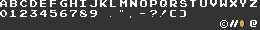
<style>
.page{position:relative;width:260px;height:30px;background:#333333}
.page>*{position:absolute;margin:0}
.t1{font:10px "PixelEmulator";letter-spacing:-0.28em;color:#ffffff}
</style>
<div class="page">
<p class="t1" style="left:0px;top:0px;width:7px;height:7px">A</p>
<p class="t1" style="left:10px;top:0px;width:7px;height:7px">b</p>
<p class="t1" style="left:20px;top:0px;width:7px;height:7px">c</p>
<p class="t1" style="left:30px;top:0px;width:7px;height:7px">d</p>
<p class="t1" style="left:40px;top:0px;width:6px;height:7px">e</p>
<p class="t1" style="left:50px;top:0px;width:6px;height:7px">f</p>
<p class="t1" style="left:60px;top:0px;width:7px;height:7px">g</p>
<p class="t1" style="left:70px;top:0px;width:7px;height:7px">h</p>
<p class="t1" style="left:80px;top:0px;width:6px;height:7px">i</p>
<p class="t1" style="left:90px;top:0px;width:7px;height:7px">j</p>
<p class="t1" style="left:100px;top:0px;width:7px;height:7px">k</p>
<p class="t1" style="left:110px;top:0px;width:6px;height:7px">l</p>
<p class="t1" style="left:120px;top:0px;width:7px;height:7px">m</p>
<p class="t1" style="left:130px;top:0px;width:7px;height:7px">n</p>
<p class="t1" style="left:140px;top:0px;width:7px;height:7px">o</p>
<p class="t1" style="left:150px;top:0px;width:7px;height:7px">p</p>
<p class="t1" style="left:160px;top:0px;width:7px;height:7px">q</p>
<p class="t1" style="left:170px;top:0px;width:7px;height:7px">r</p>
<p class="t1" style="left:180px;top:0px;width:7px;height:7px">s</p>
<p class="t1" style="left:190px;top:0px;width:6px;height:7px">t</p>
<p class="t1" style="left:200px;top:0px;width:7px;height:7px">u</p>
<p class="t1" style="left:210px;top:0px;width:7px;height:7px">v</p>
<p class="t1" style="left:220px;top:0px;width:7px;height:7px">w</p>
<p class="t1" style="left:230px;top:0px;width:7px;height:7px">x</p>
<p class="t1" style="left:240px;top:0px;width:6px;height:7px">y</p>
<p class="t1" style="left:250px;top:0px;width:7px;height:7px">z</p>
<p class="t1" style="left:0px;top:10px;width:7px;height:7px">0</p>
<p class="t1" style="left:10px;top:10px;width:6px;height:7px">1</p>
<p class="t1" style="left:20px;top:10px;width:7px;height:7px">2</p>
<p class="t1" style="left:30px;top:10px;width:7px;height:7px">3</p>
<p class="t1" style="left:40px;top:10px;width:7px;height:7px">4</p>
<p class="t1" style="left:50px;top:10px;width:7px;height:7px">5</p>
<p class="t1" style="left:60px;top:10px;width:7px;height:7px">6</p>
<p class="t1" style="left:70px;top:10px;width:7px;height:7px">7</p>
<p class="t1" style="left:80px;top:10px;width:7px;height:7px">8</p>
<p class="t1" style="left:90px;top:10px;width:7px;height:7px">9</p>
<p class="t1" style="left:120px;top:10px;width:3px;height:2px">“</p>
<p class="t1" style="left:150px;top:10px;width:7px;height:7px">?</p>
<p class="t1" style="left:160px;top:10px;width:6px;height:7px">!</p>
<p class="t1" style="left:170px;top:10px;width:6px;height:7px">(</p>
<p class="t1" style="left:180px;top:10px;width:6px;height:7px">)</p>
<p class="t1" style="left:250px;top:20px;width:7px;height:7px">@</p>
</div>
